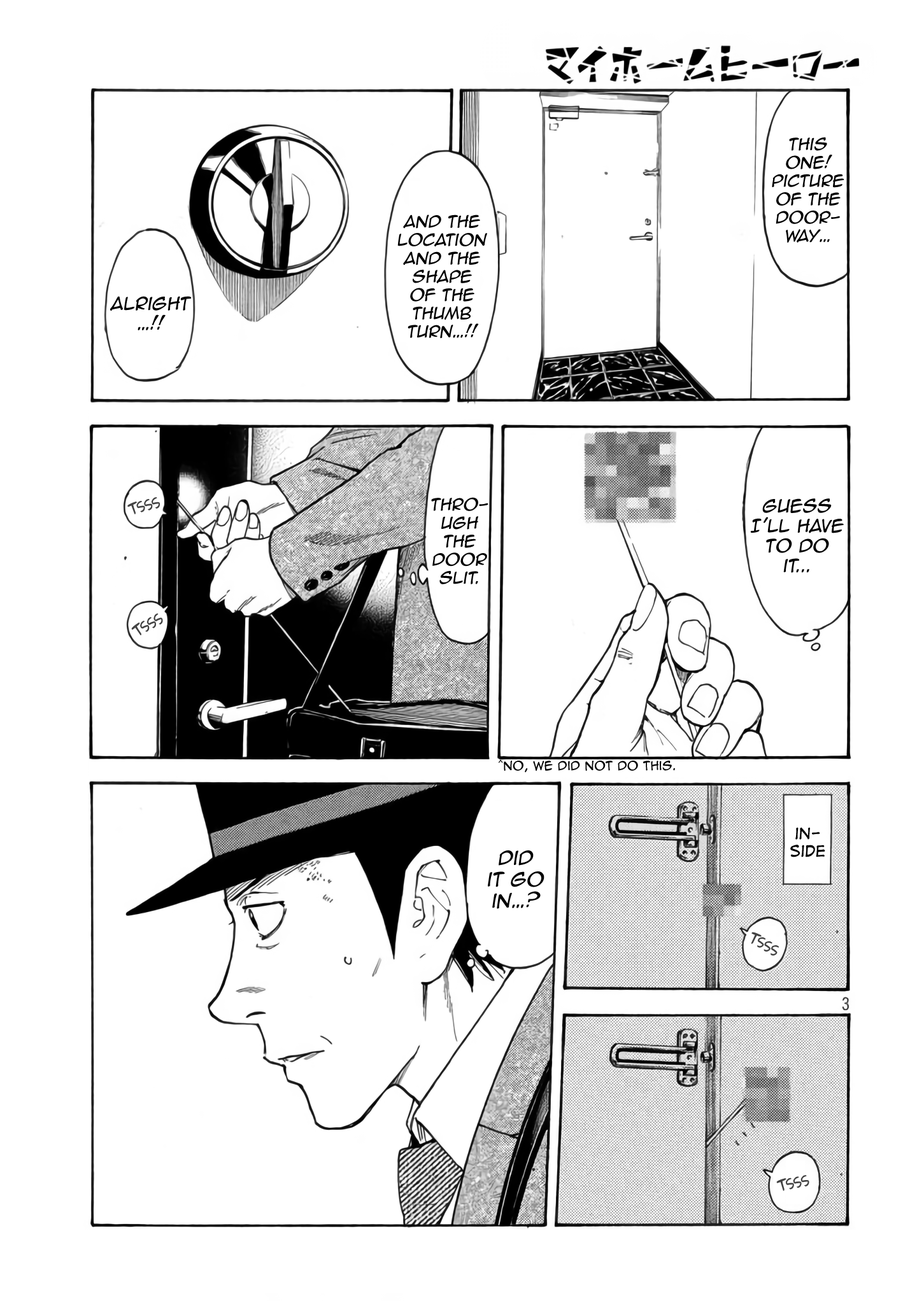
<style>
.page{position:relative;width:917px;height:1301px;background:#ffffff}
.page>*{position:absolute;margin:0}
.t1{font:15.3px "AnimeAce2.0BB";color:#000000;font-style:italic}
.t2{font:16.5px "AnimeAce2.0BB";color:#000000;font-style:italic}
.t3{font:15.3px "AdamWarrenpro";color:#434343}
.t4{font:11.5px "AnimeAce2.0BB";color:#000000}
.t5{font:14.6px "DigitalStrip";color:#000000}
.t6{font:17.8px "AnimeAce2.0BB";color:#000000;font-style:italic}
</style>
<div class="page">
<p class="t1" style="left:771px;top:137px;width:73px;height:106px;text-align:center">This one! Picture of the doorway…</p>
<p class="t1" style="left:397px;top:214px;width:90px;height:125px;text-align:center">and the<br>location and the shape <br>of the thumb turn…!!</p>
<p class="t2" style="left:110px;top:296px;width:82px;height:34px;text-align:center">Alright<br>…!!</p>
<p class="t3" style="left:127px;top:497px;width:33px;height:17px;rotate:-14deg">tsss</p>
<p class="t1" style="left:431px;top:497px;width:57px;height:87px;text-align:center">Thro-<br>ugh <br>the door <br>slit.</p>
<p class="t2" style="left:750px;top:498px;width:93px;height:75px;text-align:center">Guess I’ll have to do <br>it...</p>
<p class="t3" style="left:131px;top:613px;width:32px;height:22px;rotate:-28deg">tsss</p>
<p class="t4" style="left:498px;top:759px;width:177px;height:14px">^No, we did not do this.</p>
<p class="t5" style="left:790px;top:827px;width:35px;height:30px;text-align:center">in-<br>side</p>
<p class="t6" style="left:488px;top:850px;width:56px;height:59px;text-align:center">Did <br>it go <br>in…?</p>
<p class="t3" style="left:750px;top:932px;width:28px;height:24px;rotate:31deg">tsss</p>
<p class="t3" style="left:776px;top:1175px;width:33px;height:16px;rotate:-11deg">tsss</p>
</div>
